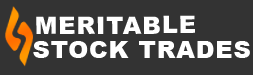
<style>
.page{position:relative;width:253px;height:75px;background:#333333}
.page>*{position:absolute;margin:0}
.t1{font:41px "Arial-Black";letter-spacing:0.04em;color:#ffffff;text-transform:uppercase}
</style>
<div class="page">
<p class="t1" style="left:36px;top:15px;width:159px;height:19px">Meritable</p>
<p class="t1" style="left:33px;top:41px;width:217px;height:17px">Stock Trades</p>
</div>
